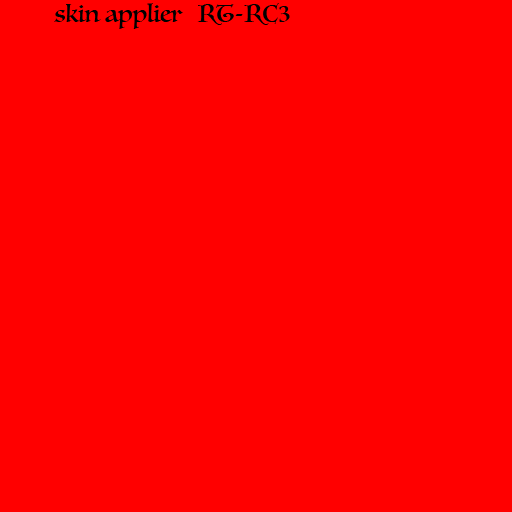
<style>
.page{position:relative;width:512px;height:512px;background:#ff0000}
.page>*{position:absolute;margin:0}
.t1{font:24px "Luminari-Regular";color:#000000}
</style>
<div class="page">
<p class="t1" style="left:54px;top:3px;width:236px;height:26px">skin applier   RT-RC3</p>
</div>
